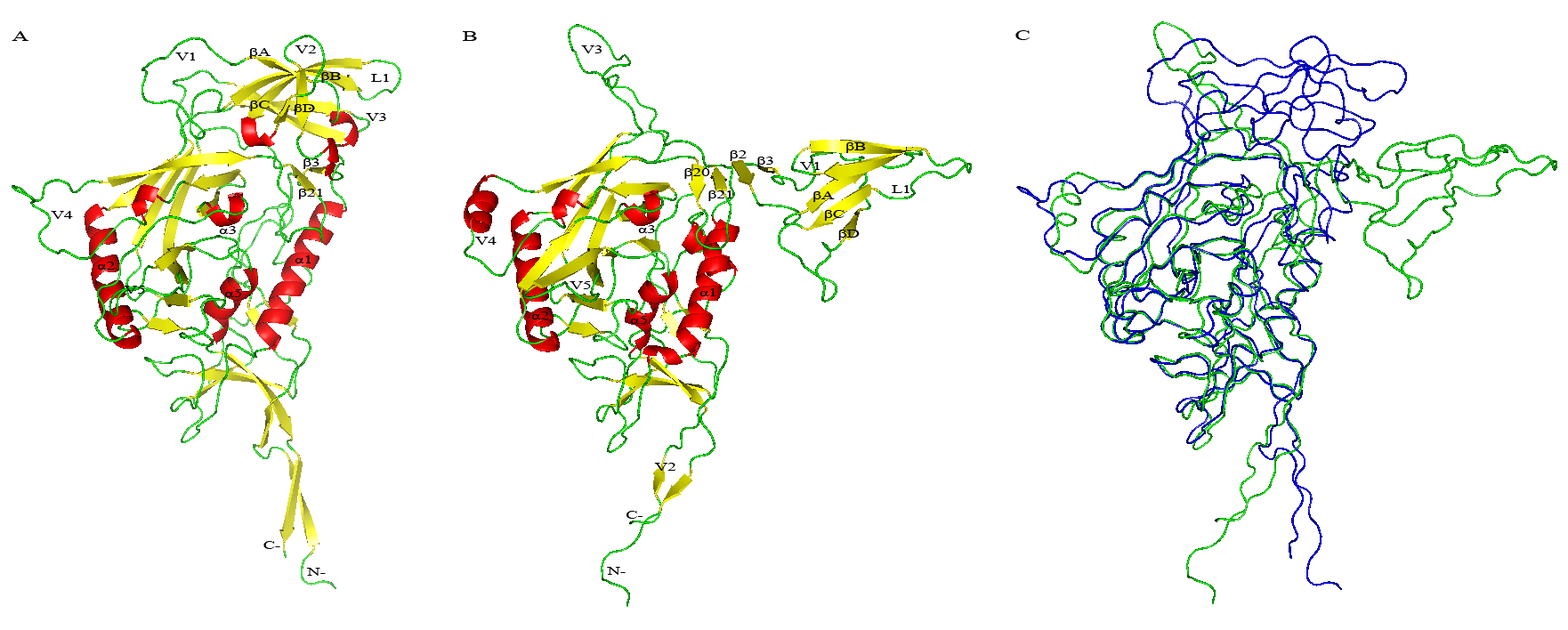
<style>
.page{position:relative;width:1568px;height:630px;background:#ffffff}
.page>*{position:absolute;margin:0}
.t1{font:14.8px "TimesNewRomanPSMT";color:#000000;scale:1.57 1}
.t2{font:11.1px "TimesNewRomanPSMT";color:#000000;scale:1.57 1}
</style>
<div class="page">
<p class="t1" style="left:12px;top:31px;width:16px;height:10px">A</p>
<p class="t1" style="left:462px;top:31px;width:15px;height:10px">B</p>
<p class="t1" style="left:1015px;top:30px;width:15px;height:10px">C</p>
<p class="t2" style="left:175px;top:53px;width:21px;height:8px">V1</p>
<p class="t2" style="left:249px;top:48px;width:22px;height:11px">βA</p>
<p class="t2" style="left:295px;top:45px;width:21px;height:8px">V2</p>
<p class="t2" style="left:581px;top:45px;width:21px;height:8px">V3</p>
<p class="t2" style="left:321px;top:72px;width:20px;height:11px">βB</p>
<p class="t2" style="left:371px;top:74px;width:18px;height:8px">L1</p>
<p class="t2" style="left:250px;top:101px;width:20px;height:10px">βC</p>
<p class="t2" style="left:294px;top:104px;width:21px;height:11px">βD</p>
<p class="t2" style="left:366px;top:113px;width:20px;height:8px">V3</p>
<p class="t2" style="left:846px;top:142px;width:20px;height:11px">βB</p>
<p class="t2" style="left:303px;top:158px;width:16px;height:11px">β3</p>
<p class="t2" style="left:730px;top:150px;width:17px;height:11px">β2</p>
<p class="t2" style="left:757px;top:157px;width:16px;height:10px">β3</p>
<p class="t2" style="left:800px;top:162px;width:20px;height:8px">V1</p>
<p class="t2" style="left:684px;top:168px;width:26px;height:11px">β20</p>
<p class="t2" style="left:892px;top:185px;width:17px;height:8px">L1</p>
<p class="t2" style="left:298px;top:189px;width:25px;height:10px">β21</p>
<p class="t2" style="left:708px;top:190px;width:24px;height:11px">β21</p>
<p class="t2" style="left:813px;top:191px;width:22px;height:11px">βA</p>
<p class="t2" style="left:51px;top:211px;width:22px;height:8px">V4</p>
<p class="t2" style="left:824px;top:210px;width:21px;height:11px">βC</p>
<p class="t2" style="left:219px;top:226px;width:17px;height:8px">α3</p>
<p class="t2" style="left:638px;top:225px;width:17px;height:8px">α3</p>
<p class="t2" style="left:838px;top:230px;width:22px;height:10px">βD</p>
<p class="t2" style="left:475px;top:237px;width:22px;height:8px">V4</p>
<p class="t2" style="left:295px;top:255px;width:16px;height:8px">α1</p>
<p class="t2" style="left:97px;top:262px;width:18px;height:8px">α2</p>
<p class="t2" style="left:570px;top:281px;width:21px;height:8px">V5</p>
<p class="t2" style="left:124px;top:286px;width:21px;height:8px">V5</p>
<p class="t2" style="left:225px;top:289px;width:17px;height:8px">α5</p>
<p class="t2" style="left:699px;top:288px;width:16px;height:8px">α1</p>
<p class="t2" style="left:531px;top:311px;width:18px;height:8px">α2</p>
<p class="t2" style="left:630px;top:316px;width:17px;height:8px">α5</p>
<p class="t2" style="left:654px;top:463px;width:21px;height:8px">V2</p>
<p class="t2" style="left:626px;top:511px;width:17px;height:8px">C-</p>
<p class="t2" style="left:263px;top:541px;width:17px;height:8px">C-</p>
<p class="t2" style="left:306px;top:568px;width:20px;height:8px">N-</p>
<p class="t2" style="left:607px;top:567px;width:19px;height:8px">N-</p>
</div>
